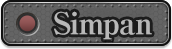
<style>
.page{position:relative;width:172px;height:49px}
.page>*{position:absolute;margin:0}
.t1{font:30px "RyuminPro-ExBold";letter-spacing:-0.04em;color:#b8b8b8}
</style>
<div class="page">
<p class="t1" style="left:54px;top:11px;width:98px;height:29px">Simpan</p>
</div>
